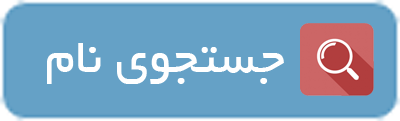
<style>
.page{position:relative;width:400px;height:121px;background:#65a1c6}
.page>*{position:absolute;margin:0}
.t1{font:53.3px "BYekan";color:#ffffff}
</style>
<div class="page">
<p class="t1" style="left:47px;top:43px;width:237px;height:41px">جستجوی نام</p>
</div>
